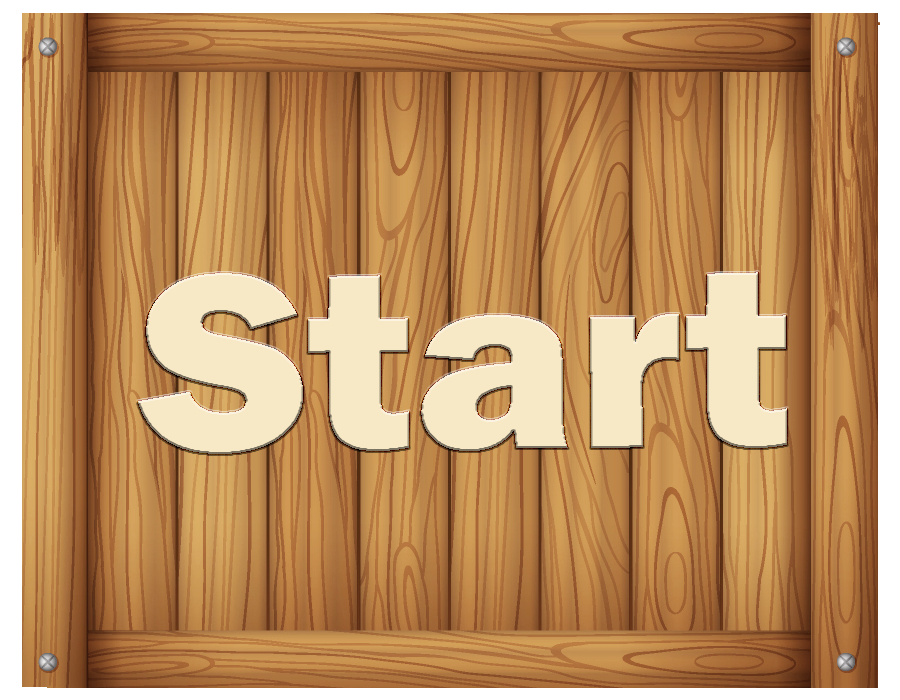
<style>
.page{position:relative;width:900px;height:700px}
.page>*{position:absolute;margin:0}
.t1{font:263.2px "FranklinGothic-Heavy";color:#f8e9c6;scale:1.05 1}
</style>
<div class="page">
<p class="t1" style="left:138px;top:272px;width:649px;height:182px;rotate:-1deg">Start</p>
</div>
